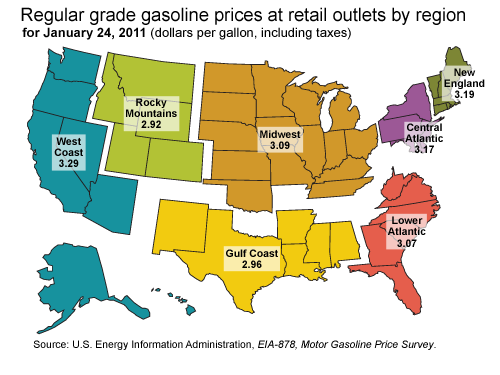
<style>
.page{position:relative;width:500px;height:375px;background:#ffffff}
.page>*{position:absolute;margin:0}
.t1{font:18.2px "ArialMT";color:#000000}
.t2{font:13px "ArialMT";color:#000000}
.t3{font:13px "Arial-BoldMT";color:#000000}
.t4{font:10.4px/11.1px "Arial-BoldMT";color:#000000}
.t5{font:10.4px "ArialMT";color:#000000}
.t6{font:10.4px "Arial-ItalicMT";color:#000000}
</style>
<div class="page">
<p class="t1" style="left:21px;top:7px;width:444px;height:18px">Regular grade gasoline prices at retail outlets by region</p>
<p class="t2" style="left:22px;top:27px;width:329px;height:13px"><span class="t3">for January 24, 2011</span> (dollars per gallon, including taxes)</p>
<p class="t4" style="left:444px;top:68px;width:41px;height:30px;text-align:center">New<br>England<br>3.19</p>
<p class="t4" style="left:126px;top:98px;width:51px;height:30px;text-align:center">Rocky<br>Mountains<br>2.92</p>
<p class="t4" style="left:405px;top:123px;width:38px;height:30px;text-align:center">Central<br>Atlantic<br>3.17</p>
<p class="t4" style="left:54px;top:137px;width:29px;height:30px;text-align:center">West<br>Coast<br>3.29</p>
<p class="t4" style="left:260px;top:130px;width:41px;height:19px;text-align:center">Midwest<br>3.09</p>
<p class="t4" style="left:387px;top:216px;width:39px;height:31px;text-align:center">Lower<br>Atlantic<br>3.07</p>
<p class="t4" style="left:226px;top:249px;width:52px;height:19px;text-align:center">Gulf Coast<br>2.96</p>
<p class="t5" style="left:33px;top:340px;width:403px;height:10px">Source: U.S. Energy Information Administration, <span class="t6">EIA-878, Motor Gasoline Price Survey</span>.</p>
</div>
